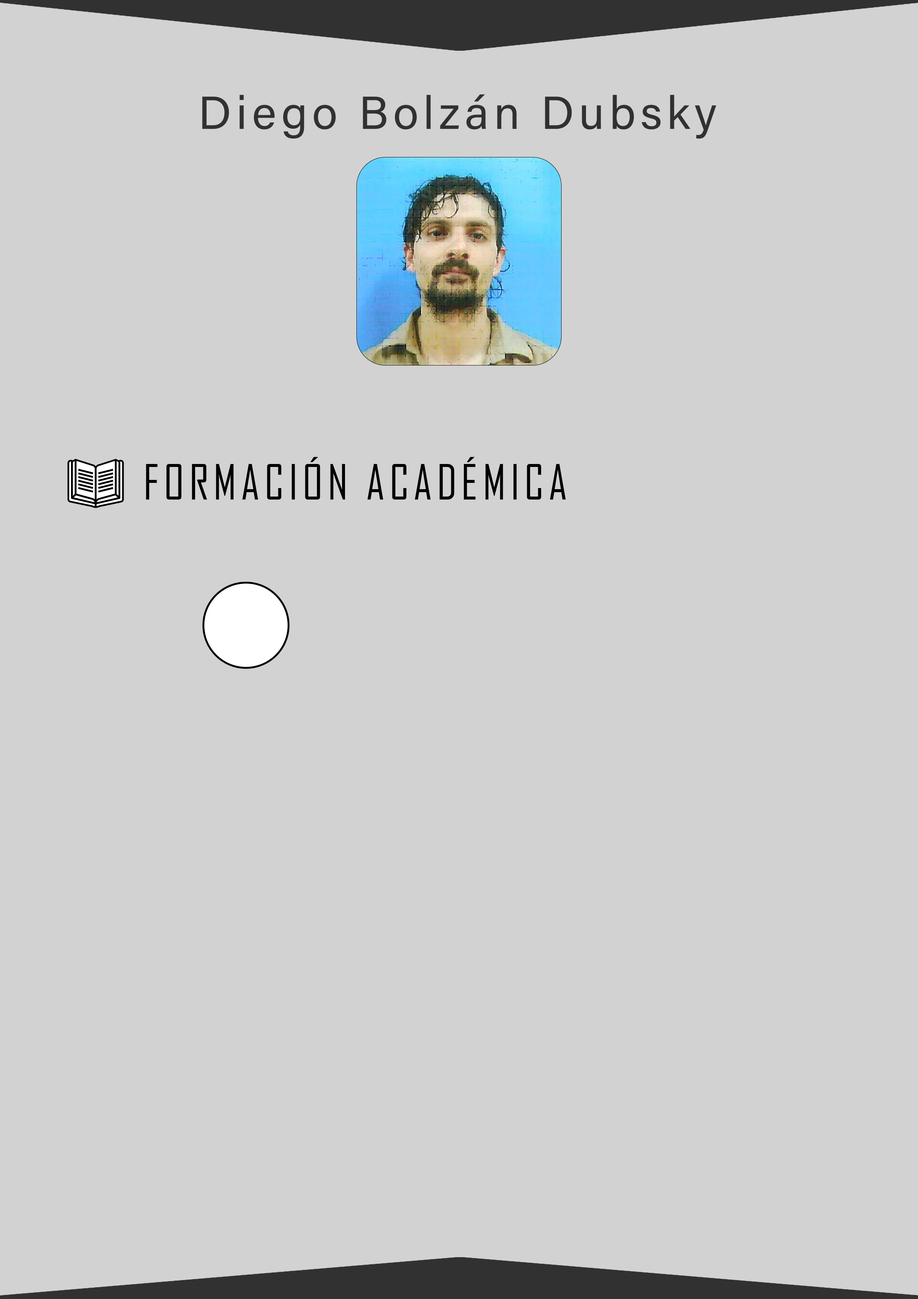
<style>
.page{position:relative;width:918px;height:1299px;background:#d2d2d2}
.page>*{position:absolute;margin:0}
.t1{font:46.3px "AcuminConcept-Regular";letter-spacing:0.1em;color:#313131}
.t2{font:46.3px "AgencyFB-Reg";letter-spacing:0.1em;color:#000000}
</style>
<div class="page">
<p class="t1" style="left:202px;top:94px;width:514px;height:45px">Diego Bolzán Dubsky</p>
<p class="t2" style="left:146px;top:457px;width:420px;height:42px">FORMACIÓN ACADÉMICA</p>
</div>
